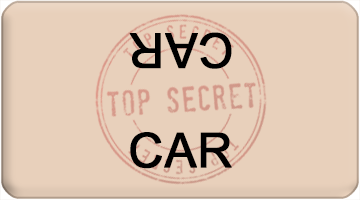
<style>
.page{position:relative;width:360px;height:200px;background:#e8d0bb}
.page>*{position:absolute;margin:0}
.t1{font:48px "ArialMT";color:#000000;font-weight:bold}
</style>
<div class="page">
<p class="t1" style="left:129px;top:32px;width:103px;height:37px;rotate:180deg">CAR</p>
<p class="t1" style="left:130px;top:132px;width:102px;height:37px">CAR</p>
</div>
